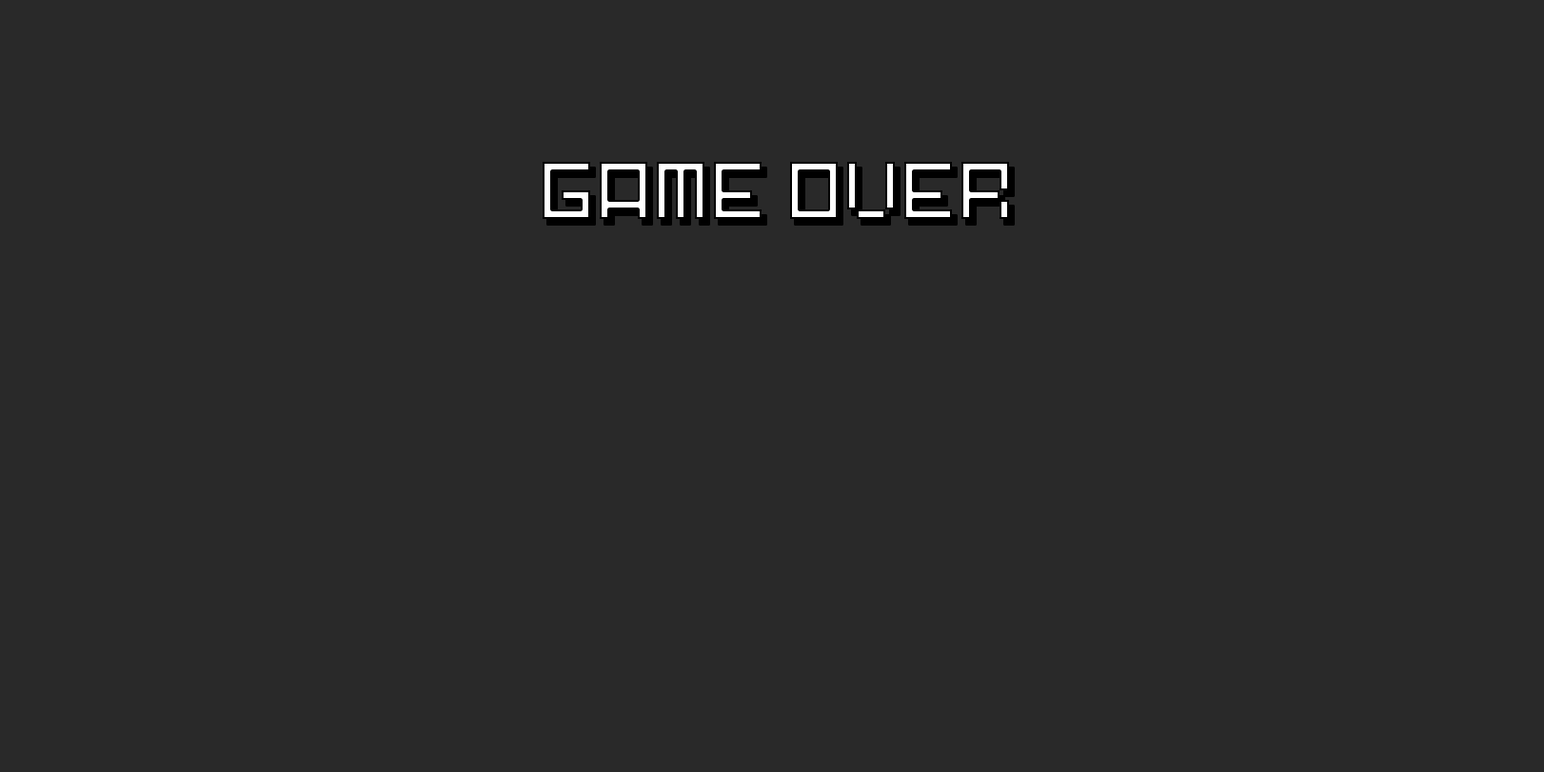
<style>
.page{position:relative;width:1544px;height:772px;background:#292929}
.page>*{position:absolute;margin:0}
.t1{font:76.2px "Pixel-Art"}
</style>
<div class="page">
<p class="t1" style="left:543px;top:162px;width:466px;height:57px">GAME OVER</p>
</div>
